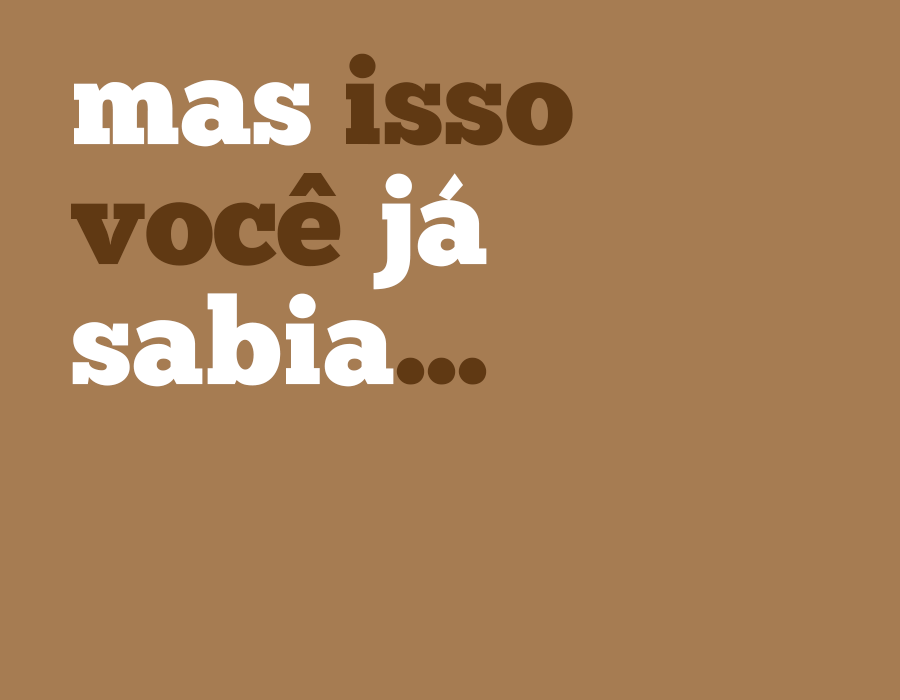
<style>
.page{position:relative;width:900px;height:700px;background:#a67c52}
.page>*{position:absolute;margin:0}
.t1{font:120.7px/120px "ChunkFive-Roman";color:#603913}
.t2{font:120.7px/120px "ChunkFive-Roman";color:#ffffff}
.t3{font:110px "GothamUltra";color:#603913}
</style>
<div class="page">
<p class="t1" style="left:71px;top:53px;width:502px;height:334px"><span class="t2">mas </span>isso<br>voce <span class="t2">já<br>sabia</span>...</p>
<p class="t3" style="left:288px;top:173px;width:49px;height:23px">^</p>
</div>
